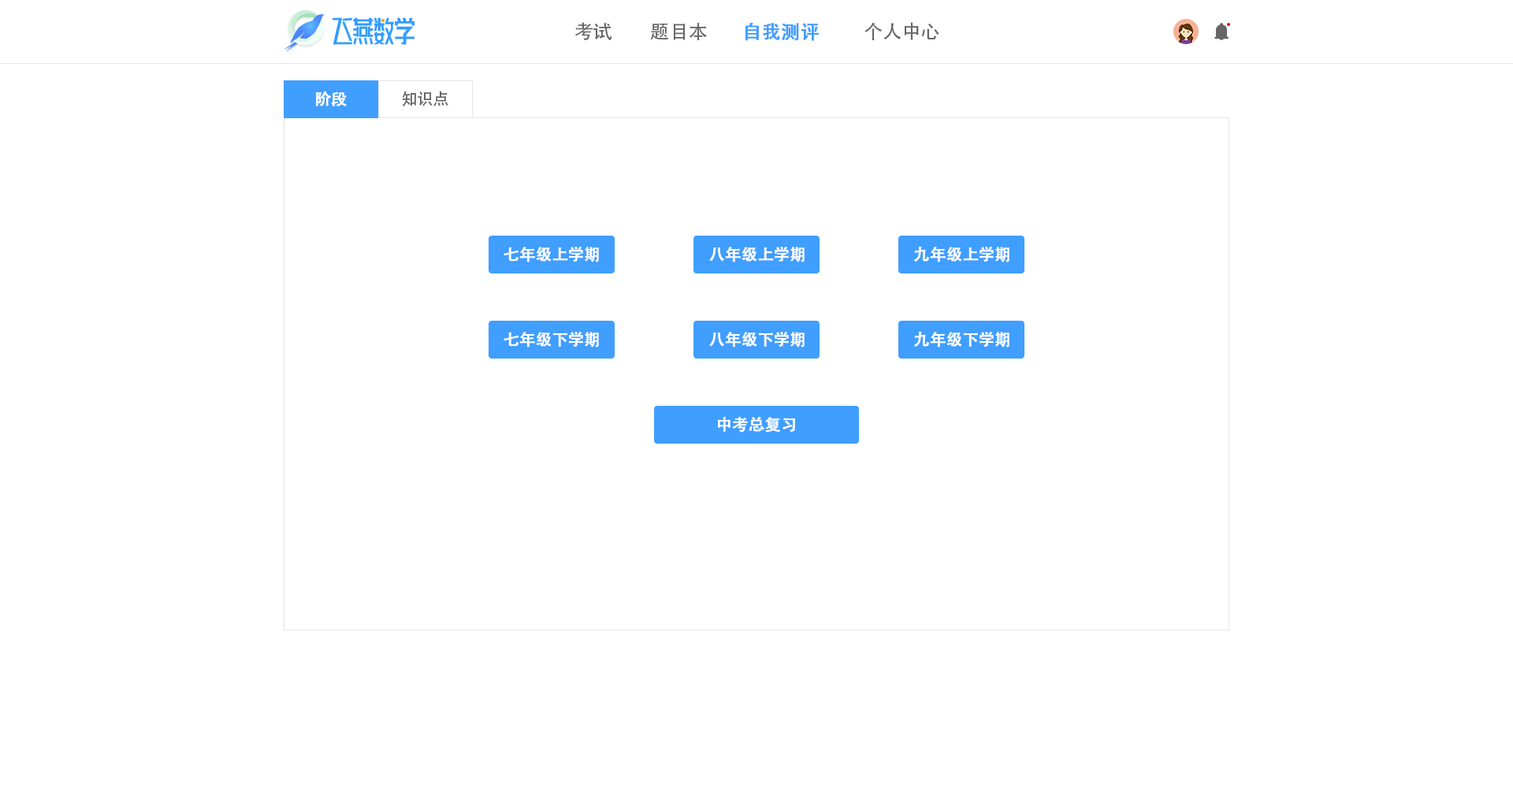
<style>
.page{position:relative;width:1513px;height:788px;background:#ffffff}
.page>*{position:absolute;margin:0}
.t1{font:18.9px "AdobeHeitiStd-Regular";color:#666666}
.t2{font:18.9px "AdobeHeitiStd-Regular";color:#409eff;font-weight:bold}
.t3{font:15.8px "AdobeHeitiStd-Regular";color:#ffffff;font-weight:bold}
.t4{font:15.8px "AdobeHeitiStd-Regular";color:#666666}
</style>
<div class="page">
<p class="t1" style="left:575px;top:22px;width:37px;height:18px">考试</p>
<p class="t1" style="left:650px;top:23px;width:57px;height:17px">题目本</p>
<p class="t2" style="left:745px;top:22px;width:74px;height:19px">自我测评</p>
<p class="t1" style="left:865px;top:22px;width:74px;height:18px">个人中心</p>
<p class="t3" style="left:316px;top:91px;width:31px;height:15px">阶段</p>
<p class="t4" style="left:402px;top:91px;width:46px;height:15px">知识点</p>
<p class="t3" style="left:913px;top:246px;width:97px;height:16px">九年级上学期</p>
<p class="t3" style="left:504px;top:247px;width:95px;height:15px">七年级上学期</p>
<p class="t3" style="left:709px;top:247px;width:96px;height:15px">八年级上学期</p>
<p class="t3" style="left:504px;top:332px;width:95px;height:16px">七年级下学期</p>
<p class="t3" style="left:709px;top:332px;width:96px;height:16px">八年级下学期</p>
<p class="t3" style="left:913px;top:331px;width:97px;height:17px">九年级下学期</p>
<p class="t3" style="left:717px;top:417px;width:79px;height:16px">中考总复习</p>
</div>
